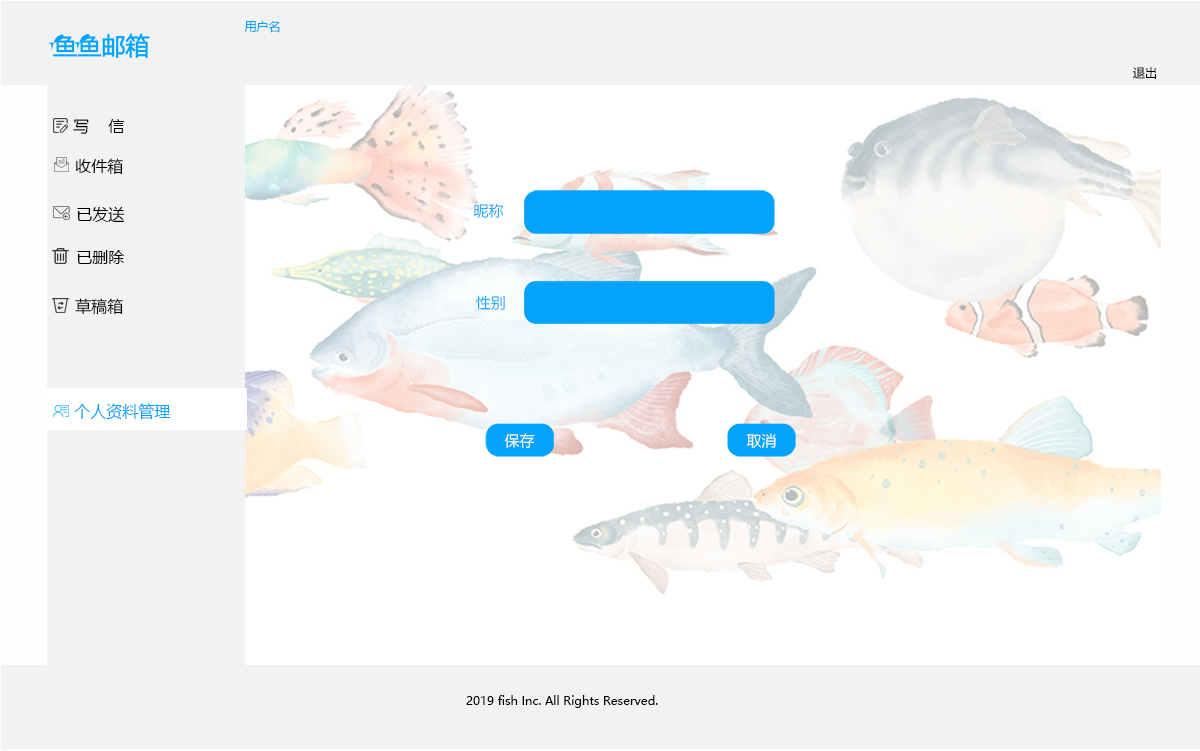
<style>
.page{position:relative;width:1200px;height:751px;background:#f2f2f2}
.page>*{position:absolute;margin:0}
.t1{font:12px "MicrosoftYaHei";color:#03a3fc}
.t2{font:12px "MicrosoftYaHei";color:#000000}
.t3{font:16px "MicrosoftYaHei";color:#000304}
.t4{font:16px "MicrosoftYaHei";color:#000102}
.t5{font:15px "MicrosoftYaHeiLight"}
.t6{font:16px "MicrosoftYaHei";color:#000203}
.t7{font:16px "MicrosoftYaHei";color:#03a3fc}
.t8{font:15px "MicrosoftYaHeiLight";color:#ffffff}
</style>
<div class="page">
<p class="t1" style="left:244px;top:21px;width:36px;height:12px">用户名</p>
<p class="t2" style="left:1133px;top:67px;width:23px;height:12px">退出</p>
<p class="t3" style="left:73px;top:119px;width:52px;height:15px">写    信</p>
<p class="t4" style="left:75px;top:158px;width:48px;height:17px">收件箱</p>
<p class="t4" style="left:77px;top:206px;width:48px;height:17px">已发送</p>
<p class="t5" style="left:474px;top:203px;width:30px;height:15px">昵称</p>
<p class="t3" style="left:77px;top:250px;width:48px;height:14px">已删除</p>
<p class="t6" style="left:75px;top:298px;width:48px;height:17px">草稿箱</p>
<p class="t5" style="left:476px;top:295px;width:29px;height:15px">性别</p>
<p class="t7" style="left:74px;top:403px;width:97px;height:17px">个人资料管理</p>
<p class="t8" style="left:504px;top:433px;width:31px;height:15px">保存</p>
<p class="t8" style="left:746px;top:433px;width:30px;height:15px">取消</p>
<p class="t2" style="left:466px;top:695px;width:192px;height:13px">2019 fish Inc. All Rights Reserved.</p>
</div>
